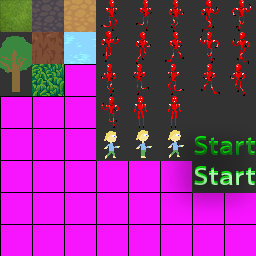
<style>
.page{position:relative;width:256px;height:256px;background:#f714ff}
.page>*{position:absolute;margin:0}
.t1{font:24.9px "MyriadPro-Regular";scale:1.28 1}
.t2{font:24.9px "MyriadPro-Regular";color:#0d7a10;scale:1.28 1}
.t3{font:24.9px "MyriadPro-Regular";color:#a2ffa4;scale:1.28 1}
</style>
<div class="page">
<p class="t1" style="left:194px;top:136px;width:61px;height:17px">Start</p>
<p class="t2" style="left:194px;top:138px;width:61px;height:17px">Start</p>
<p class="t1" style="left:194px;top:166px;width:61px;height:17px">Start</p>
<p class="t3" style="left:194px;top:168px;width:61px;height:17px">Start</p>
</div>
